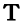
<style>
.page{position:relative;width:24px;height:24px;background:#ffffff}
.page>*{position:absolute;margin:0}
.t1{font:24px "SimSun";color:#000000;font-weight:bold;scale:1.5 1}
</style>
<div class="page">
<p class="t1" style="left:3px;top:4px;width:17px;height:17px">T</p>
</div>
